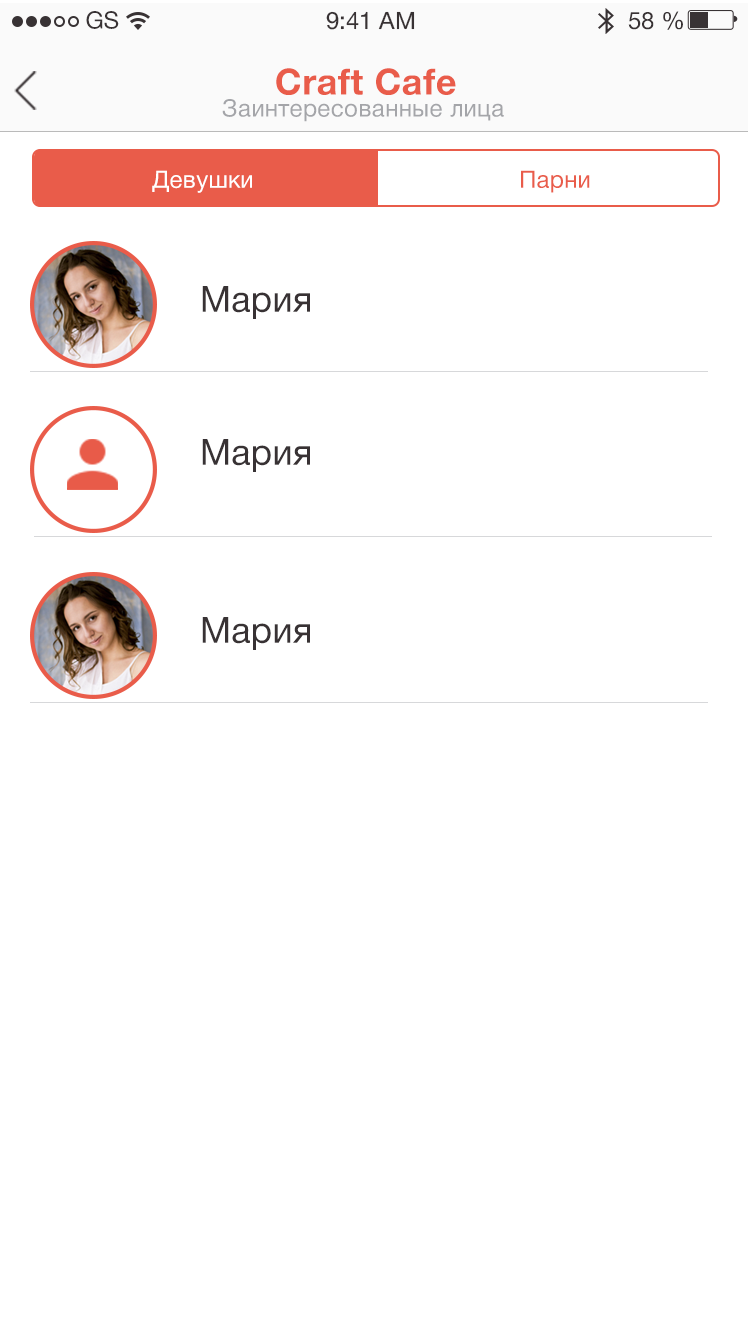
<style>
.page{position:relative;width:750px;height:1335px;background:#ffffff}
.page>*{position:absolute;margin:0}
.t1{font:24px "HelveticaNeueCyr-Roman";color:#383234}
.t2{font:36px "HelveticaNeueCyr-Bold";letter-spacing:0.012em;color:#e95c4a}
.t3{font:24px "HelveticaNeueCyr-Roman";letter-spacing:0.016em;color:#a4a5a9}
.t4{font:24px "HelveticaNeueCyr-Roman";letter-spacing:0.016em;color:#ffffff}
.t5{font:24px "HelveticaNeueCyr-Roman";letter-spacing:0.016em;color:#e95c4a}
.t6{font:36px "HelveticaNeueCyr-Roman";letter-spacing:0.016em;color:#383234}
</style>
<div class="page">
<p class="t1" style="left:86px;top:11px;width:33px;height:18px">GS</p>
<p class="t1" style="left:326px;top:11px;width:89px;height:19px">9:41 AM</p>
<p class="t1" style="left:628px;top:11px;width:55px;height:19px">58 %</p>
<p class="t2" style="left:276px;top:68px;width:180px;height:27px">Craft Cafe</p>
<p class="t3" style="left:222px;top:99px;width:282px;height:23px">Заинтересованные лица</p>
<p class="t4" style="left:152px;top:170px;width:100px;height:23px">Девушки</p>
<p class="t5" style="left:521px;top:170px;width:69px;height:23px">Парни</p>
<p class="t6" style="left:202px;top:286px;width:108px;height:33px">Мария</p>
<p class="t6" style="left:202px;top:439px;width:108px;height:33px">Мария</p>
<p class="t6" style="left:202px;top:617px;width:108px;height:33px">Мария</p>
</div>
